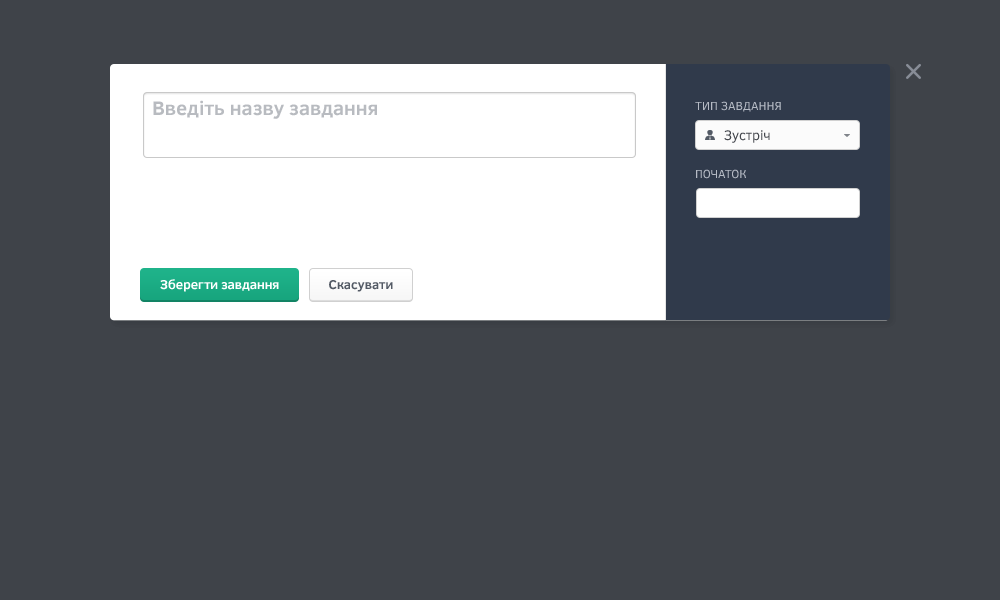
<style>
.page{position:relative;width:1000px;height:600px;background:#3f4349}
.page>*{position:absolute;margin:0}
.t1{font:20px "ClearSans-Bold";color:#b8bbc0}
.t2{font:12px "ClearSans";color:#b6bbc5;text-transform:uppercase}
.t3{font:14px "ClearSans";color:#44474d}
.t4{font:13px "ClearSans-Bold";color:#ffffff}
.t5{font:13px "ClearSans-Bold";color:#535a65}
</style>
<div class="page">
<p class="t1" style="left:153px;top:100px;width:224px;height:19px">Введіть назву завдання</p>
<p class="t2" style="left:695px;top:101px;width:86px;height:11px">Тип завдання</p>
<p class="t3" style="left:724px;top:130px;width:46px;height:13px">Зустріч</p>
<p class="t2" style="left:696px;top:169px;width:50px;height:10px">Початок</p>
<p class="t4" style="left:160px;top:279px;width:119px;height:13px">Зберегти завдання</p>
<p class="t5" style="left:329px;top:280px;width:64px;height:12px">Скасувати</p>
</div>
